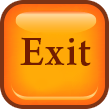
<style>
.page{position:relative;width:109px;height:109px}
.page>*{position:absolute;margin:0}
.t1{font:60px "AdobeNaskh-Medium";letter-spacing:0.02em;color:#721c00;scale:0.95 1}
</style>
<div class="page">
<p class="t1" style="left:20px;top:37px;width:71px;height:29px">Exit</p>
</div>
